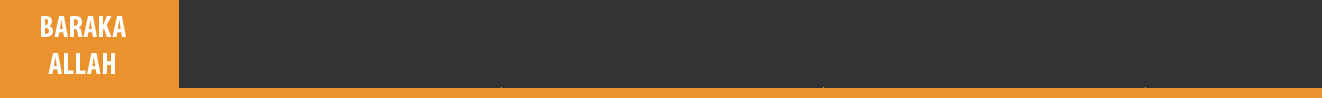
<style>
.page{position:relative;width:1322px;height:98px;background:#333333}
.page>*{position:absolute;margin:0}
.t1{font:31.3px "MyriadPro-BoldCond";color:#ffffff}
</style>
<div class="page">
<p class="t1" style="left:41px;top:16px;width:85px;height:58px;text-align:center">BARAKA<br>ALLAH</p>
</div>
